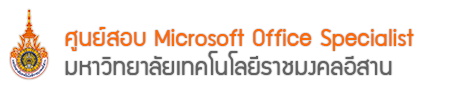
<style>
.page{position:relative;width:450px;height:88px;background:#ffffff}
.page>*{position:absolute;margin:0}
.t1{font:27.4px "supermarket";color:#ff6803}
.t2{font:27.4px "supermarket";color:#626161}
</style>
<div class="page">
<p class="t1" style="left:65px;top:27px;width:349px;height:24px">ศูนย์สอบ Microsoft Office Specialist</p>
<p class="t2" style="left:65px;top:51px;width:327px;height:24px">มหาวิทยาลัยเทคโนโลยีราชมงคลอีสาน</p>
</div>
